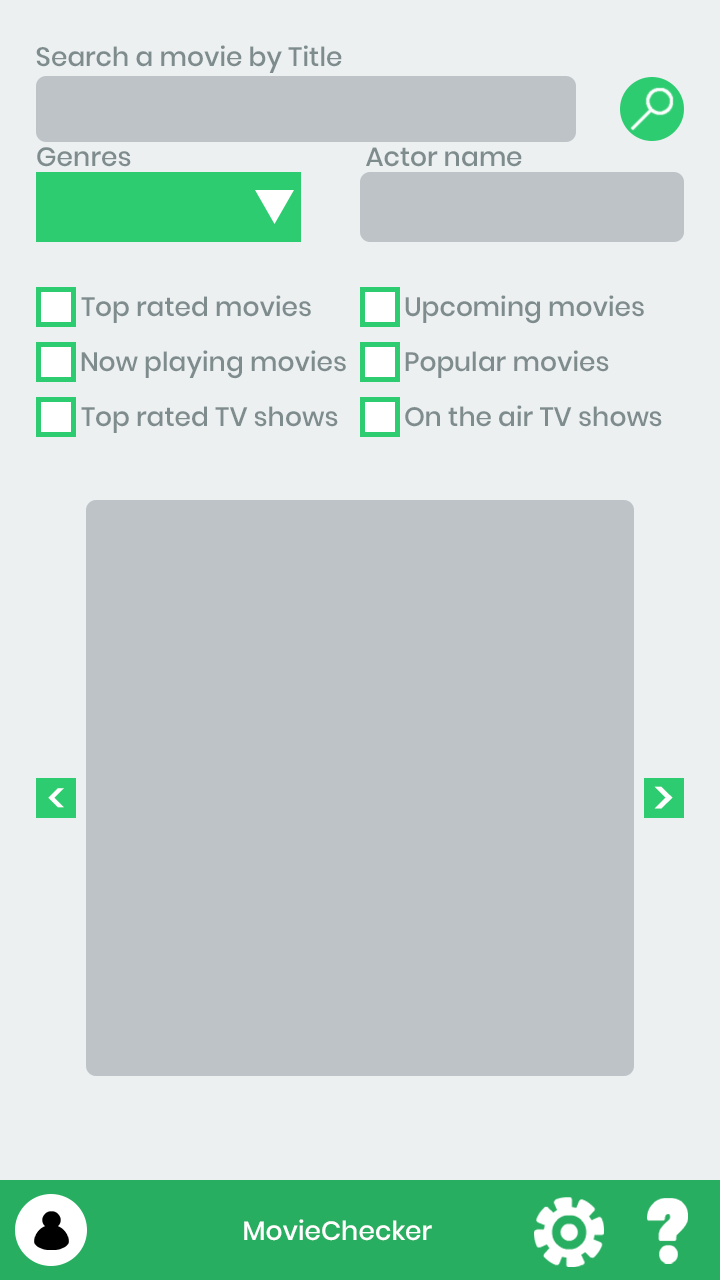
<style>
.page{position:relative;width:720px;height:1280px;background:#ecf0f1}
.page>*{position:absolute;margin:0}
.t1{font:26.4px "Poppins-Medium";color:#7f8c8d}
.t2{font:42.1px "Poppins-Medium";color:#ffffff}
.t3{font:48px "Poppins-Medium";color:#ffffff}
.t4{font:26.4px "Poppins-Medium";color:#ffffff}
</style>
<div class="page">
<p class="t1" style="left:36px;top:45px;width:306px;height:28px">Search a movie by Title</p>
<p class="t1" style="left:37px;top:147px;width:94px;height:20px">Genres</p>
<p class="t1" style="left:366px;top:147px;width:156px;height:20px">Actor name</p>
<p class="t1" style="left:81px;top:295px;width:230px;height:28px">Top rated movies</p>
<p class="t1" style="left:405px;top:295px;width:239px;height:29px">Upcoming movies</p>
<p class="t1" style="left:81px;top:350px;width:265px;height:29px">Now playing movies</p>
<p class="t1" style="left:405px;top:350px;width:204px;height:28px">Popular movies</p>
<p class="t1" style="left:81px;top:406px;width:257px;height:27px">Top rated TV shows</p>
<p class="t1" style="left:405px;top:405px;width:257px;height:22px">On the air TV shows</p>
<p class="t2" style="left:48px;top:788px;width:16px;height:20px">&lt;</p>
<p class="t3" style="left:654px;top:786px;width:19px;height:23px">&gt;</p>
<p class="t4" style="left:244px;top:1219px;width:188px;height:22px">MovieChecker</p>
</div>
